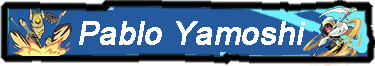
<style>
.page{position:relative;width:375px;height:66px;background:#255b9e}
.page>*{position:absolute;margin:0}
.t1{font:32px "ArialMT";color:#ffffff;font-weight:bold;font-style:italic}
</style>
<div class="page">
<p class="t1" style="left:79px;top:21px;width:226px;height:24px">Pablo Yamoshi</p>
</div>
